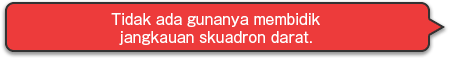
<style>
.page{position:relative;width:450px;height:58px;background:#ed3b3b}
.page>*{position:absolute;margin:0}
.t1{font:14px/18px "GothicMB101Pro-Regular";color:#ffffff}
</style>
<div class="page">
<p class="t1" style="left:111px;top:13px;width:209px;height:32px;text-align:center">Tidak ada gunanya membidik<br>jangkauan skuadron darat.</p>
</div>
